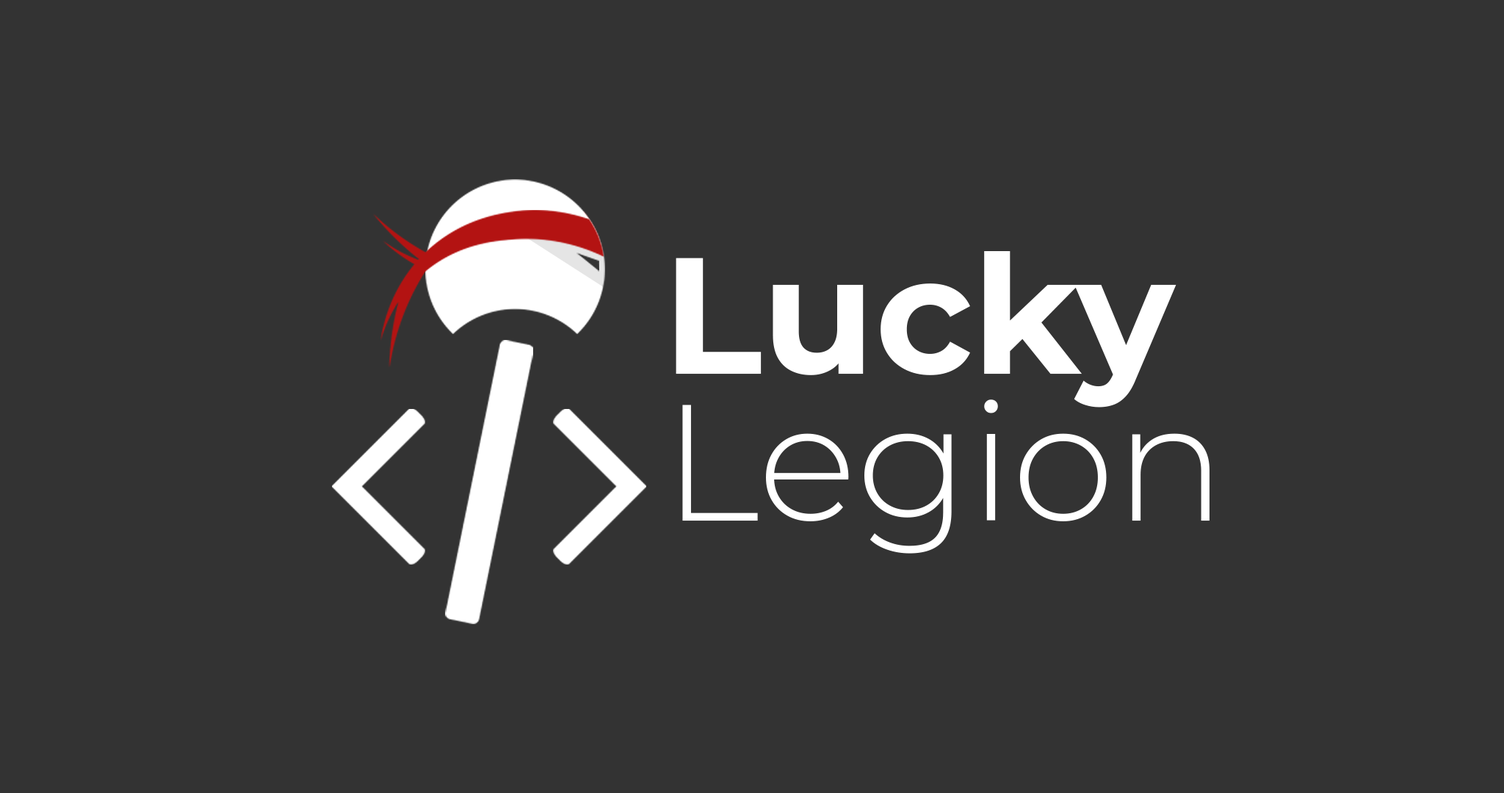
<style>
.page{position:relative;width:1504px;height:793px;background:#333333}
.page>*{position:absolute;margin:0}
.t1{font:165.2px/146.8px "Montserrat-Light";color:#ffffff}
.t2{font:165.2px/146.8px "Montserrat-Bold";color:#ffffff}
</style>
<div class="page">
<p class="t1" style="left:676px;top:251px;width:533px;height:303px"><span class="t2">Lucky</span> <br>Legion</p>
</div>
